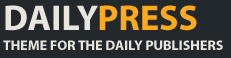
<style>
.page{position:relative;width:231px;height:58px;background:#23282d}
.page>*{position:absolute;margin:0}
.t1{font:36px "MyriadPro-Bold";color:#e7e5de}
.t2{font:36px "MyriadPro-Bold";color:#ffab19}
.t3{font:14px "MyriadPro-Bold";color:#e7e5de}
</style>
<div class="page">
<p class="t1" style="left:5px;top:5px;width:192px;height:26px">DAILY<span class="t2">PRESS</span></p>
<p class="t3" style="left:3px;top:40px;width:220px;height:10px">THEME FOR THE DAILY PUBLISHERS</p>
</div>
